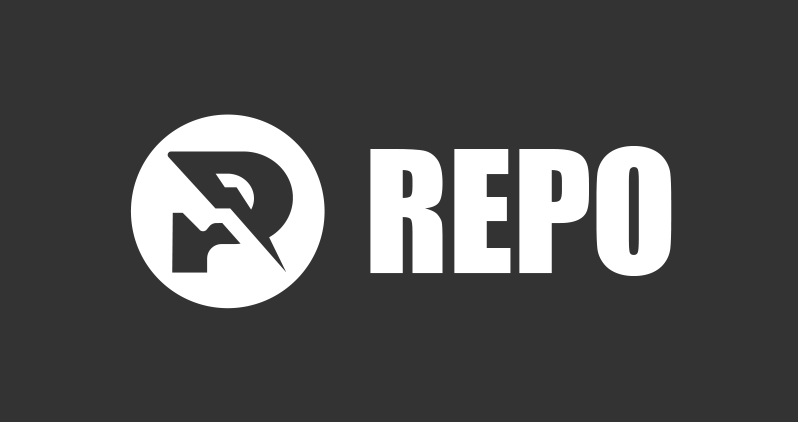
<style>
.page{position:relative;width:798px;height:422px;background:#333333}
.page>*{position:absolute;margin:0}
.t1{font:156.5px "Impact";color:#ffffff}
</style>
<div class="page">
<p class="t1" style="left:370px;top:146px;width:302px;height:130px">REPO</p>
</div>
